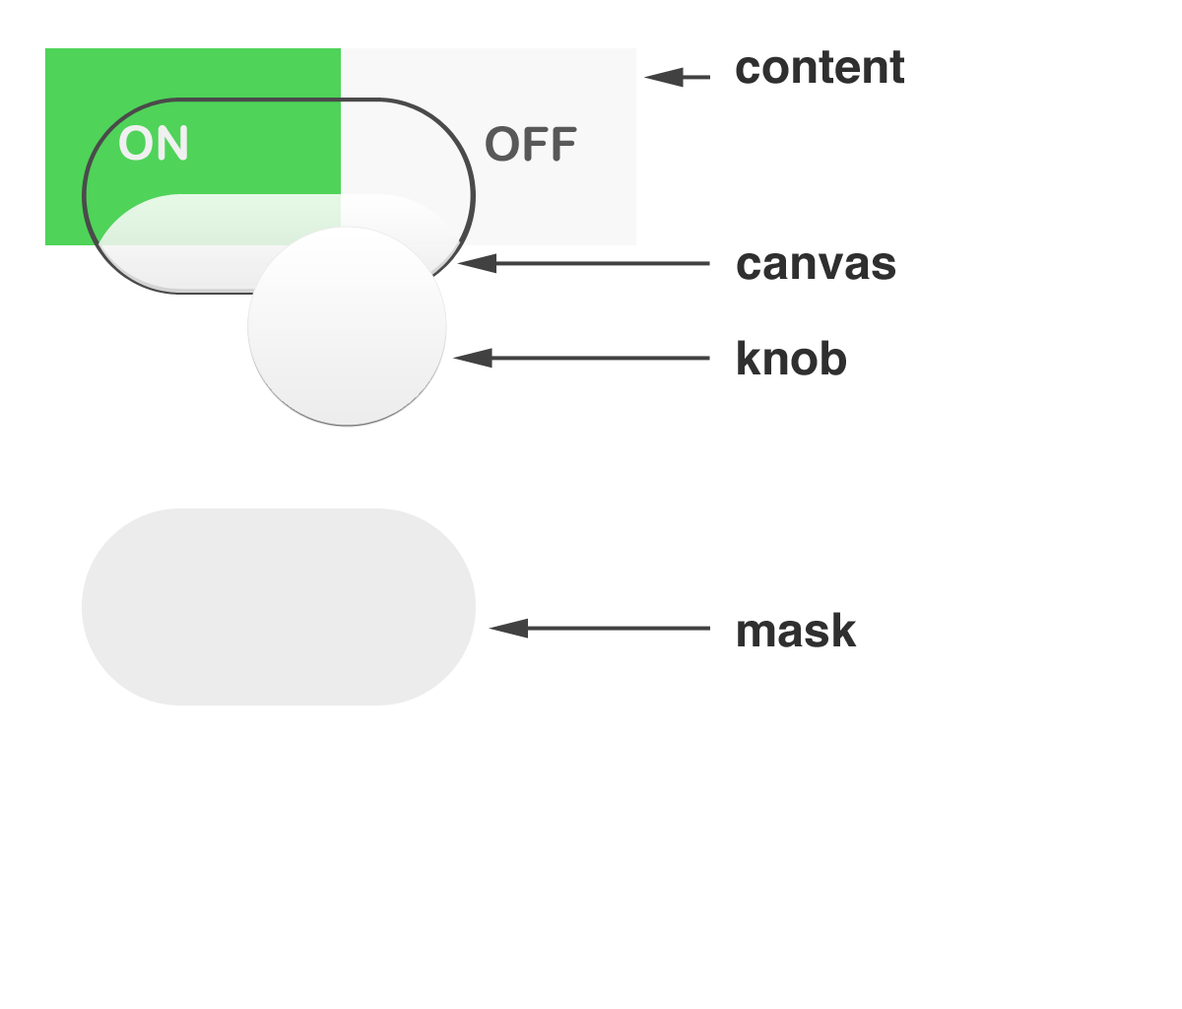
<style>
.page{position:relative;width:1182px;height:1009px;background:#ffffff}
.page>*{position:absolute;margin:0}
.t1{font:47.3px "Helvetica-Bold";color:#2f2f2f}
.t2{font:47.3px "ArialRoundedMTBold";color:#f0f0f0}
.t3{font:47.3px "ArialRoundedMTBold";color:#595858}
</style>
<div class="page">
<p class="t1" style="left:736px;top:50px;width:168px;height:34px">content</p>
<p class="t2" style="left:119px;top:125px;width:68px;height:36px">ON</p>
<p class="t3" style="left:486px;top:126px;width:91px;height:36px">OFF</p>
<p class="t1" style="left:737px;top:253px;width:158px;height:27px">canvas</p>
<p class="t1" style="left:738px;top:340px;width:108px;height:35px">knob</p>
<p class="t1" style="left:738px;top:612px;width:119px;height:35px">mask</p>
</div>
